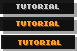
<style>
.page{position:relative;width:77px;height:51px;background:#101010}
.page>*{position:absolute;margin:0}
.t1{font:8px "04b03";color:#c9c9c9;font-weight:bold}
.t2{font:8px "04b03";color:#ff9e20;font-weight:bold}
</style>
<div class="page">
<p class="t1" style="left:16px;top:4px;width:43px;height:5px">TUTORIAL</p>
<p class="t2" style="left:16px;top:21px;width:43px;height:5px">TUTORIAL</p>
<p class="t2" style="left:18px;top:40px;width:43px;height:5px">TUTORIAL</p>
</div>
